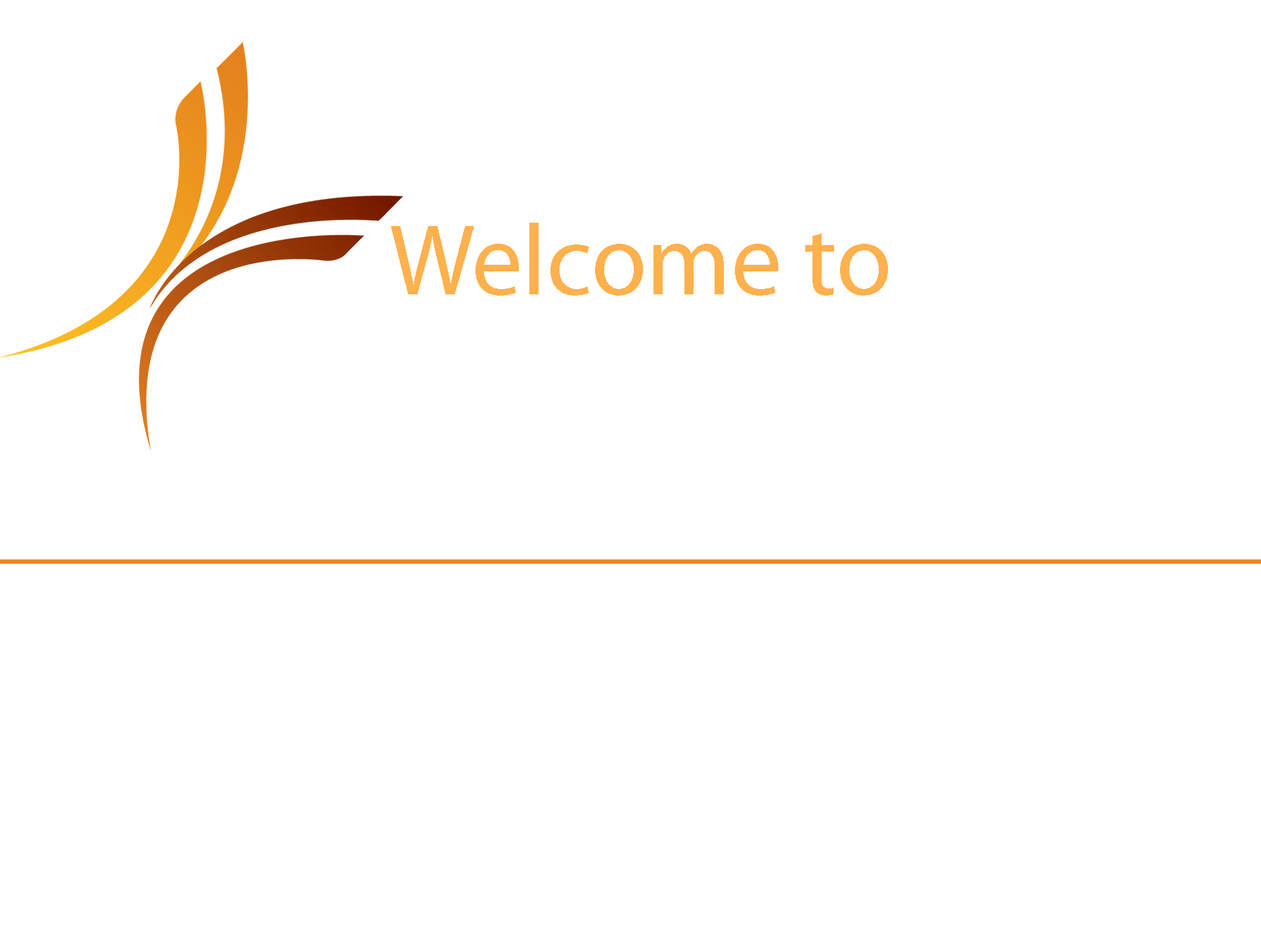
<style>
.page{position:relative;width:1261px;height:946px;background:#ffffff}
.page>*{position:absolute;margin:0}
.t1{font:101.2px "MyriadPro-Regular";color:#ffb14d}
</style>
<div class="page">
<p class="t1" style="left:391px;top:223px;width:497px;height:73px">Welcome to</p>
</div>
